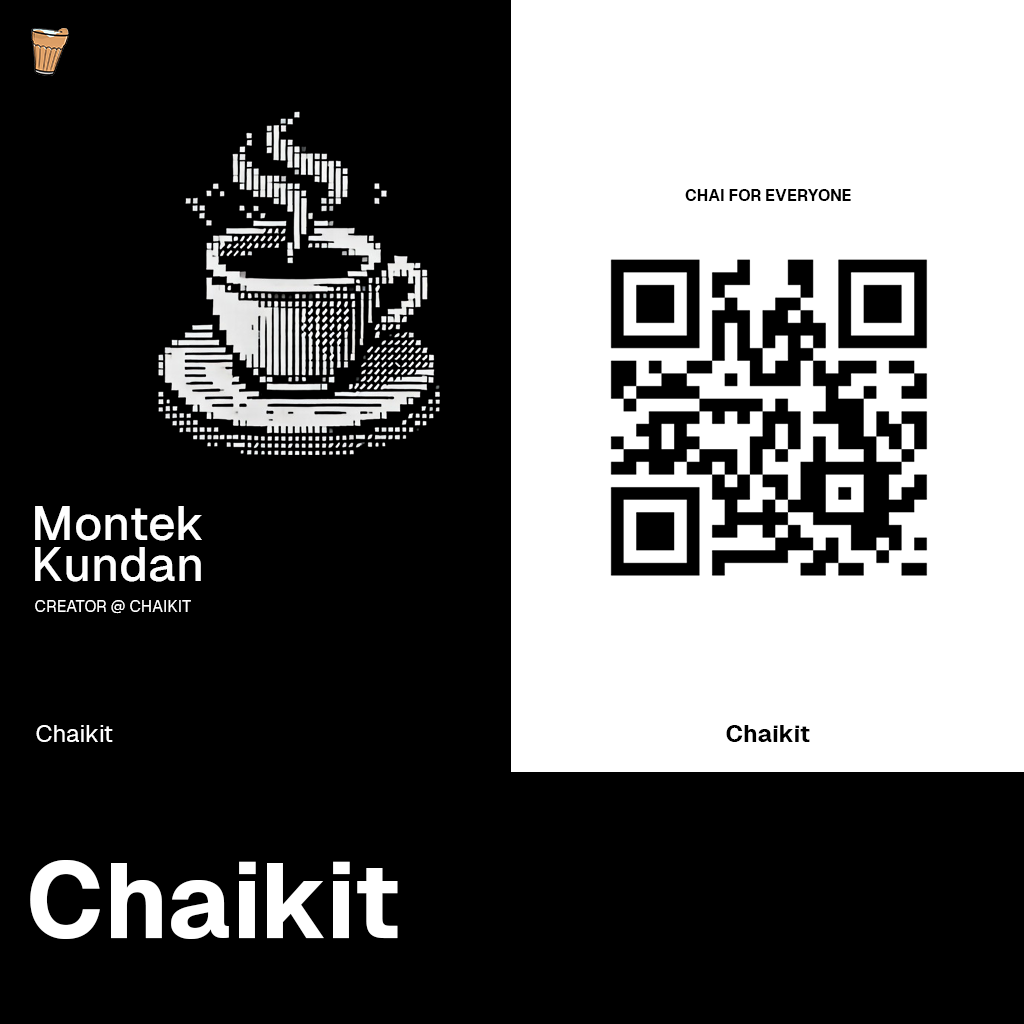
<style>
.page{position:relative;width:1024px;height:1024px;background:#000000}
.page>*{position:absolute;margin:0}
.t1{font:16px "Geist-Bold";color:#000000}
.t2{font:48px/41px "Geist-Medium";color:#ffffff}
.t3{font:16px "Geist-Regular";color:#ffffff}
.t4{font:24px "Geist-Regular";color:#ffffff}
.t5{font:24px "Geist-Bold";color:#000000}
.t6{font:106px "Geist-Bold";color:#ffffff}
</style>
<div class="page">
<p class="t1" style="left:685px;top:189px;width:166px;height:12px">CHAI FOR EVERYONE</p>
<p class="t2" style="left:35px;top:506px;width:167px;height:76px">Montek <br>Kundan</p>
<p class="t3" style="left:35px;top:600px;width:156px;height:14px">CREATOR @ CHAIKIT</p>
<p class="t4" style="left:36px;top:725px;width:77px;height:17px">Chaikit</p>
<p class="t5" style="left:726px;top:725px;width:84px;height:17px">Chaikit</p>
<p class="t6" style="left:30px;top:860px;width:368px;height:79px">Chaikit</p>
</div>
